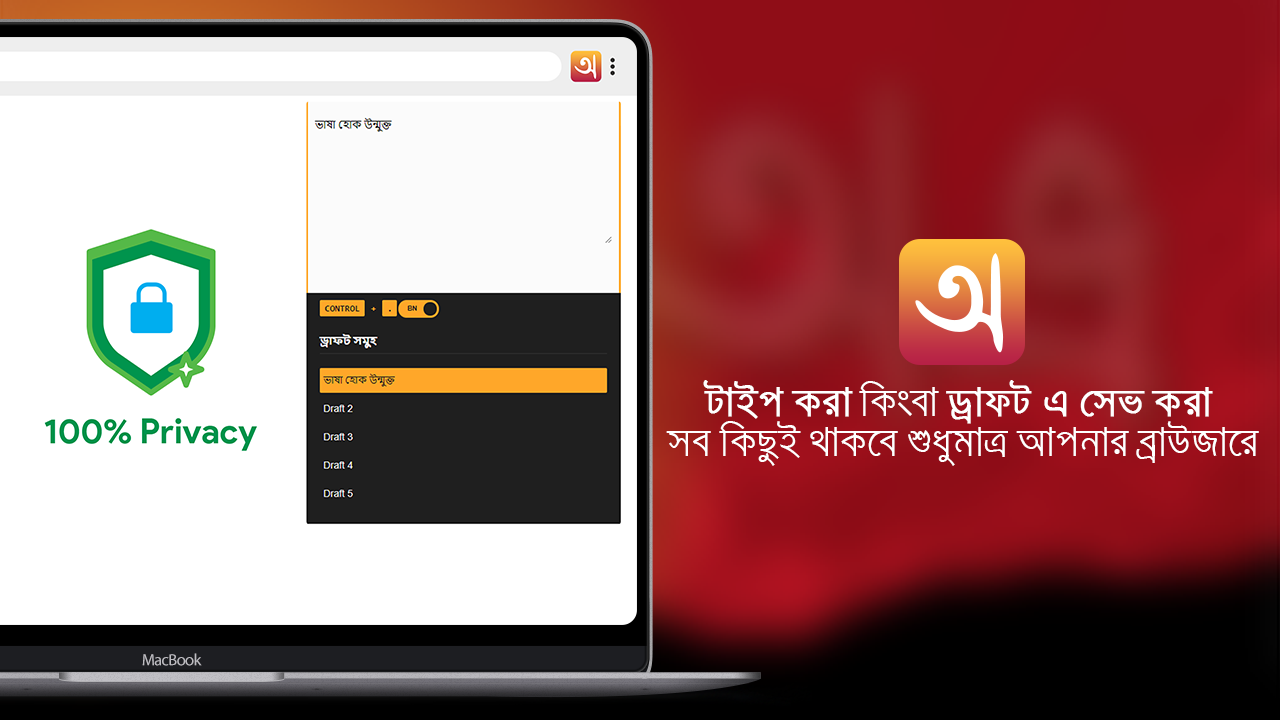
<style>
.page{position:relative;width:1280px;height:720px;background:#ffffff}
.page>*{position:absolute;margin:0}
.t1{font:33.2px "SiyamRupaliANSI";color:#ffffff}
.t2{font:33.2px "SiyamRupaliANSI";color:#ffffff;font-weight:bold}
.t3{font:16.4px "MyriadPro-Regular";letter-spacing:-0.04em;color:#bebdc2}
</style>
<div class="page">
<p class="t1" style="left:666px;top:380px;width:593px;height:86px;text-align:center"><span class="t2">UvBc Kiv</span> wKsev <span class="t2">WªvdU G †mf Kiv</span> <br>me wKQzB _vK‡e ïaygvÎ Avcbvi eªvDRv‡i</p>
<p class="t3" style="left:142px;top:653px;width:60px;height:13px">MacBook</p>
</div>
